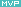
<style>
.page{position:relative;width:21px;height:7px;background:#4abcbc}
.page>*{position:absolute;margin:0}
.t1{font:8px "5x5-Pixel";color:#f8fff9}
</style>
<div class="page">
<p class="t1" style="left:2px;top:1px;width:17px;height:5px">mvp</p>
</div>
